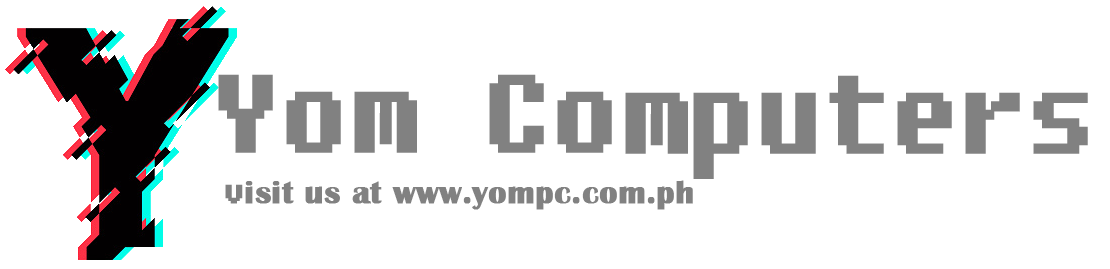
<style>
.page{position:relative;width:1110px;height:269px;background:#ffffff}
.page>*{position:absolute;margin:0}
.t1{font:108.3px "Fixedsys";color:#818181;font-weight:bold}
.t2{font:33.3px "BritannicBold";color:#818181;font-weight:bold}
.t3{font:33.3px "Fixedsys";color:#818181;font-weight:bold}
</style>
<div class="page">
<p class="t1" style="left:218px;top:74px;width:870px;height:105px">Yom Computers</p>
<p class="t2" style="left:225px;top:180px;width:468px;height:30px"><span class="t3">v</span>isit us at www.yompc.com.ph</p>
</div>
